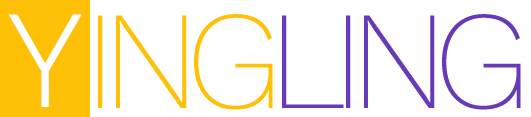
<style>
.page{position:relative;width:531px;height:117px;background:#ffffff}
.page>*{position:absolute;margin:0}
.t1{font:140px "WorkSans-Light";color:#ffffff}
.t2{font:140px "WorkSans-ExtraLight";letter-spacing:-0.1em;color:#673ab7}
.t3{font:140px "WorkSans-ExtraLight";letter-spacing:-0.1em;color:#ffc107}
</style>
<div class="page">
<p class="t1" style="left:8px;top:14px;width:74px;height:93px">Y</p>
<p class="t2" style="left:98px;top:14px;width:423px;height:96px"><span class="t3">ING</span>LING</p>
</div>
